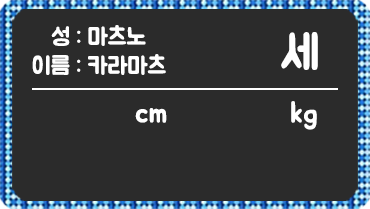
<style>
.page{position:relative;width:370px;height:209px;background:#2b2b2b}
.page>*{position:absolute;margin:0}
.t1{font:24px "BMJUA";color:#ffffff}
.t2{font:48px "BMJUA";color:#ffffff}
.t3{font:30px "BMJUA";color:#ffffff}
</style>
<div class="page">
<p class="t1" style="left:51px;top:25px;width:95px;height:21px">성 : 마츠노</p>
<p class="t2" style="left:281px;top:32px;width:37px;height:38px">세</p>
<p class="t1" style="left:32px;top:54px;width:134px;height:21px">이름 : 카라마츠</p>
<p class="t3" style="left:291px;top:101px;width:26px;height:29px">kg</p>
<p class="t3" style="left:135px;top:108px;width:32px;height:15px">cm</p>
</div>
